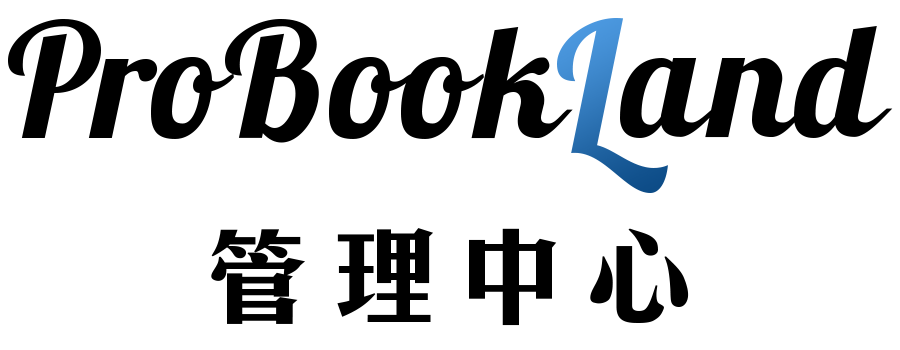
<style>
.page{position:relative;width:900px;height:350px;background:#ffffff}
.page>*{position:absolute;margin:0}
.t1{font:158.8px "Lobster1.3";letter-spacing:0.025em;color:#000000}
.t2{font:177.5px "Lobster1.3";letter-spacing:0.025em;scale:0.95 1}
.t3{font:106px "CHei3HK-Bold";letter-spacing:0.2em;color:#000000}
</style>
<div class="page">
<p class="t1" style="left:8px;top:19px;width:565px;height:124px">ProBook</p>
<p class="t2" style="left:557px;top:18px;width:111px;height:175px">L</p>
<p class="t1" style="left:620px;top:26px;width:273px;height:112px">and</p>
<p class="t3" style="left:211px;top:228px;width:478px;height:98px">管理中心</p>
</div>
